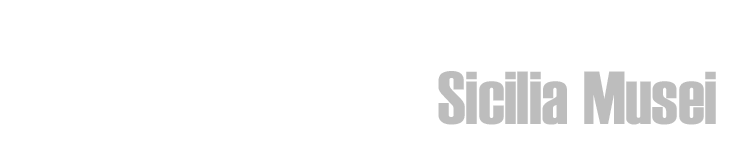
<style>
.page{position:relative;width:750px;height:155px;background:#ffffff}
.page>*{position:absolute;margin:0}
.t1{font:74.9px "Haettenschweiler";color:#a6a6a6}
</style>
<div class="page">
<p class="t1" style="left:438px;top:71px;width:278px;height:54px;opacity:0.74">Sicilia Musei</p>
</div>
